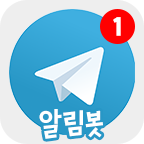
<style>
.page{position:relative;width:144px;height:144px;background:#eeeeee}
.page>*{position:absolute;margin:0}
.t1{font:29.8px "OTSangolgogaeB";color:#ffffff}
.t2{font:31.2px "OTSangolgogaeR";color:#ffffff}
</style>
<div class="page">
<p class="t1" style="left:113px;top:17px;width:8px;height:19px">1</p>
<p class="t2" style="left:39px;top:109px;width:64px;height:30px">알림봇</p>
</div>
